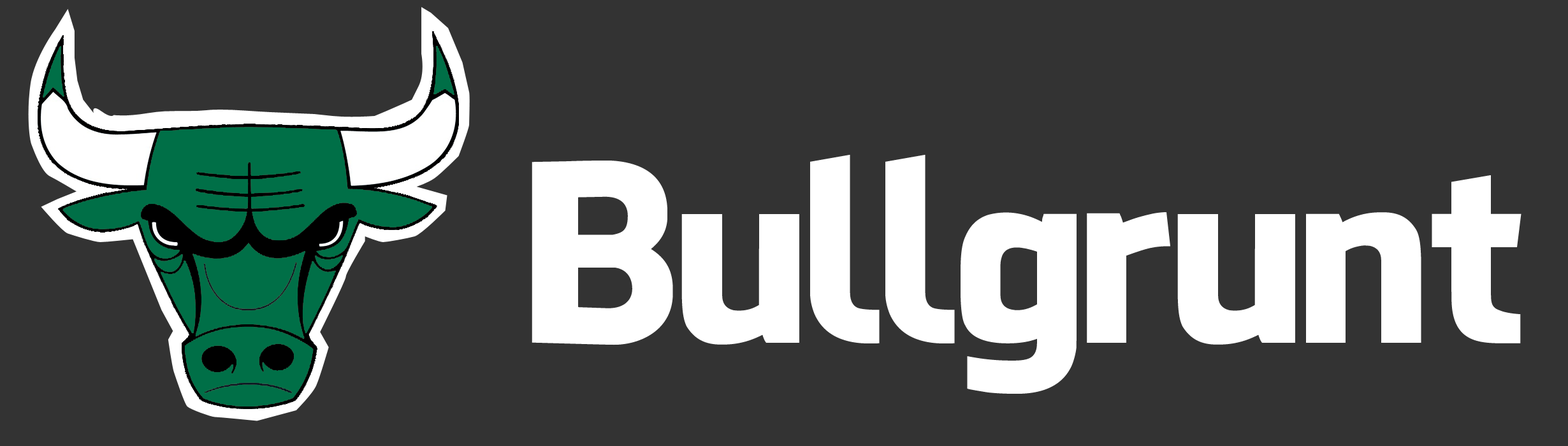
<style>
.page{position:relative;width:1568px;height:446px;background:#333333}
.page>*{position:absolute;margin:0}
.t1{font:241.4px "FacebookLetterFaces";letter-spacing:-0.025em;color:#ffffff}
</style>
<div class="page">
<p class="t1" style="left:532px;top:155px;width:989px;height:239px">Bullgrunt</p>
</div>
